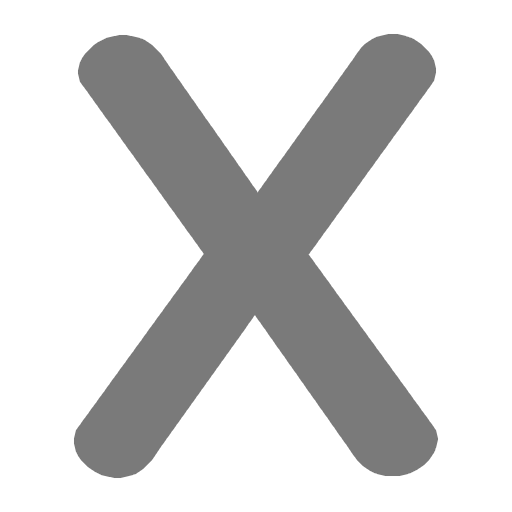
<style>
.page{position:relative;width:512px;height:512px;background:#ffffff}
.page>*{position:absolute;margin:0}
.t1{font:619.8px "Omnes-Regular";color:#7a7a7a}
</style>
<div class="page">
<p class="t1" style="left:92px;top:52px;width:328px;height:408px">X</p>
</div>
